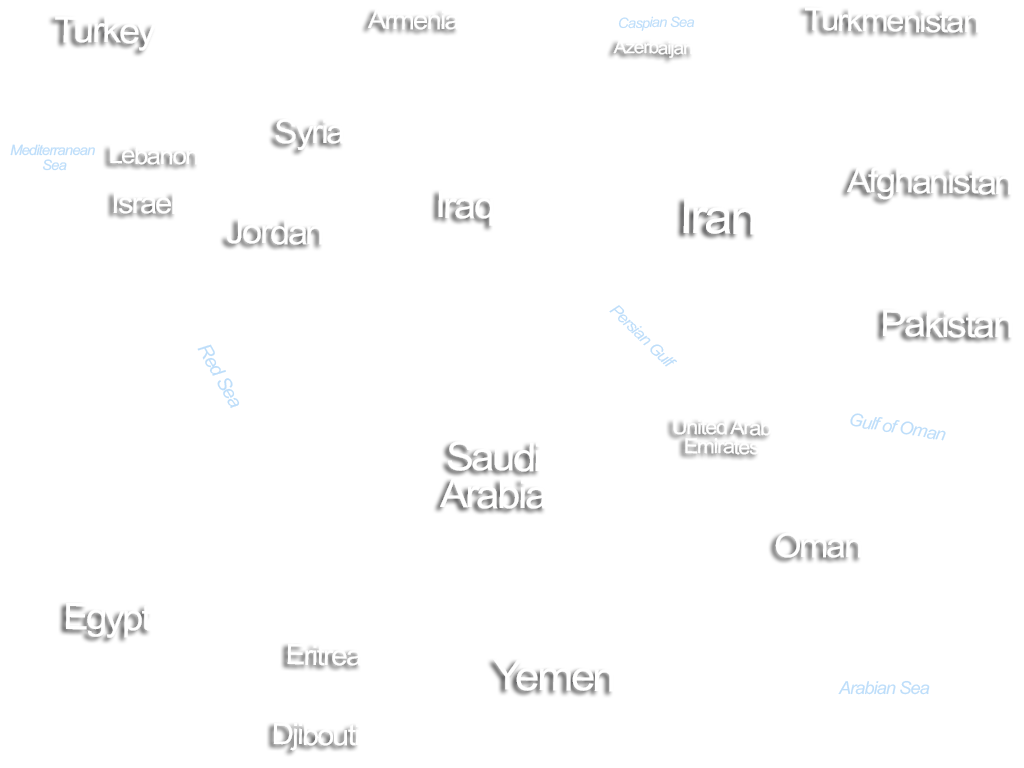
<style>
.page{position:relative;width:1024px;height:768px;background:#ffffff}
.page>*{position:absolute;margin:0}
.t1{font:35.8px "ArialMT";letter-spacing:-0.06em;color:#ffffff;scale:1.05 1}
.t2{font:26px "ArialMT";letter-spacing:-0.06em;color:#ffffff;scale:1.05 1}
.t3{font:14.2px "Arial-ItalicMT";letter-spacing:-0.06em;color:#bedefa;scale:1.05 1}
.t4{font:31.5px "ArialMT";letter-spacing:-0.06em;color:#ffffff;scale:1.05 1}
.t5{font:18.1px "ArialMT";letter-spacing:-0.06em;color:#ffffff;scale:1.05 1}
.t6{font:33.3px "ArialMT";letter-spacing:-0.06em;color:#ffffff;scale:1.05 1}
.t7{font:14.1px/24.7px "Arial-ItalicMT";letter-spacing:-0.06em;color:#bedefa;scale:1.05 1}
.t8{font:14.1px/15.4px "Arial-ItalicMT";letter-spacing:-0.06em;color:#bedefa;scale:1.05 1}
.t9{font:24.5px "ArialMT";letter-spacing:-0.06em;color:#ffffff;scale:1.05 1}
.t10{font:34px "ArialMT";letter-spacing:-0.06em;color:#ffffff;scale:1.05 1}
.t11{font:29.2px "ArialMT";letter-spacing:-0.06em;color:#ffffff;scale:1.05 1}
.t12{font:37.4px "ArialMT";letter-spacing:-0.06em;color:#ffffff;scale:1.05 1}
.t13{font:48.8px "ArialMT";letter-spacing:-0.06em;color:#ffffff;scale:1.05 1}
.t14{font:34.1px "ArialMT";letter-spacing:-0.06em;color:#ffffff;scale:1.05 1}
.t15{font:16px "Arial-ItalicMT";letter-spacing:-0.06em;color:#bedefa;scale:1.05 1}
.t16{font:18.9px "Arial-ItalicMT";letter-spacing:-0.06em;color:#bedefa;scale:1.05 1}
.t17{font:17.6px "Arial-ItalicMT";letter-spacing:-0.06em;color:#bedefa;scale:1.05 1}
.t18{font:20.5px/19.3px "ArialMT";letter-spacing:-0.06em;color:#ffffff;scale:1.05 1}
.t19{font:39.6px/37.3px "ArialMT";letter-spacing:-0.06em;color:#ffffff;scale:1.05 1}
.t20{font:33.4px "ArialMT";letter-spacing:-0.06em;color:#ffffff;scale:1.05 1}
.t21{font:36.4px "ArialMT";letter-spacing:-0.06em;color:#ffffff;scale:1.05 1}
.t22{font:28.3px "ArialMT";letter-spacing:-0.06em;color:#ffffff;scale:1.05 1}
.t23{font:41.3px "ArialMT";letter-spacing:-0.06em;color:#ffffff;scale:1.05 1}
</style>
<div class="page">
<p class="t1" style="left:55px;top:16px;width:101px;height:35px;rotate:1deg">Turkey</p>
<p class="t2" style="left:368px;top:9px;width:91px;height:21px;rotate:1deg">Armenia</p>
<p class="t3" style="left:618px;top:16px;width:77px;height:15px;rotate:-1deg">Caspian Sea</p>
<p class="t4" style="left:805px;top:7px;width:175px;height:26px;rotate:1deg">Turkmenistan</p>
<p class="t5" style="left:613px;top:40px;width:80px;height:18px;rotate:1deg">Azerbaijan</p>
<p class="t6" style="left:275px;top:119px;width:69px;height:31px;rotate:1deg">Syria</p>
<p class="t7" style="left:10px;top:144px;width:85px;height:27px;text-align:center;rotate:-1deg">Mediterranean <br><span class="t8">Sea</span></p>
<p class="t9" style="left:110px;top:145px;width:88px;height:20px;rotate:1deg">Lebanon</p>
<p class="t10" style="left:847px;top:167px;width:165px;height:33px;rotate:1deg">Afghanistan</p>
<p class="t11" style="left:113px;top:192px;width:63px;height:22px;rotate:1deg">Israel</p>
<p class="t12" style="left:438px;top:190px;width:56px;height:36px;rotate:1deg">Iraq</p>
<p class="t13" style="left:683px;top:198px;width:73px;height:37px;rotate:1deg">Iran</p>
<p class="t14" style="left:227px;top:218px;width:96px;height:27px;rotate:1deg">Jordan</p>
<p class="t15" style="left:609px;top:305px;width:68px;height:62px;rotate:44deg">Persian Gulf</p>
<p class="t12" style="left:883px;top:309px;width:130px;height:29px;rotate:1deg">Pakistan</p>
<p class="t16" style="left:197px;top:344px;width:43px;height:65px;rotate:60deg">Red Sea</p>
<p class="t17" style="left:850px;top:413px;width:96px;height:28px;rotate:9deg">Gulf of Oman</p>
<p class="t18" style="left:673px;top:419px;width:99px;height:36px;text-align:center;rotate:1deg">United Arab<br>Emirates</p>
<p class="t19" style="left:440px;top:441px;width:107px;height:68px;text-align:center;rotate:1deg">Saudi<br>Arabia</p>
<p class="t20" style="left:775px;top:532px;width:87px;height:26px;rotate:1deg">Oman</p>
<p class="t21" style="left:66px;top:603px;width:86px;height:35px;rotate:1deg">Egypt</p>
<p class="t22" style="left:287px;top:643px;width:75px;height:23px;rotate:1deg">Eritrea</p>
<p class="t23" style="left:493px;top:659px;width:121px;height:33px;rotate:1deg">Yemen</p>
<p class="t17" style="left:838px;top:680px;width:92px;height:15px;rotate:-1deg">Arabian Sea</p>
<p class="t11" style="left:273px;top:723px;width:86px;height:28px;rotate:1deg">Djibouti</p>
</div>
